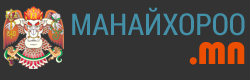
<style>
.page{position:relative;width:250px;height:80px;background:#333333}
.page>*{position:absolute;margin:0}
.t1{font:30px "RobotoCondensed-Regular";color:#4490a8}
.t2{font:30px "TaurusHeavy-Mon";color:#ec4f01}
</style>
<div class="page">
<p class="t1" style="left:72px;top:7px;width:173px;height:29px">МАНАЙХОРОО</p>
<p class="t2" style="left:189px;top:42px;width:56px;height:23px">.MN</p>
</div>
